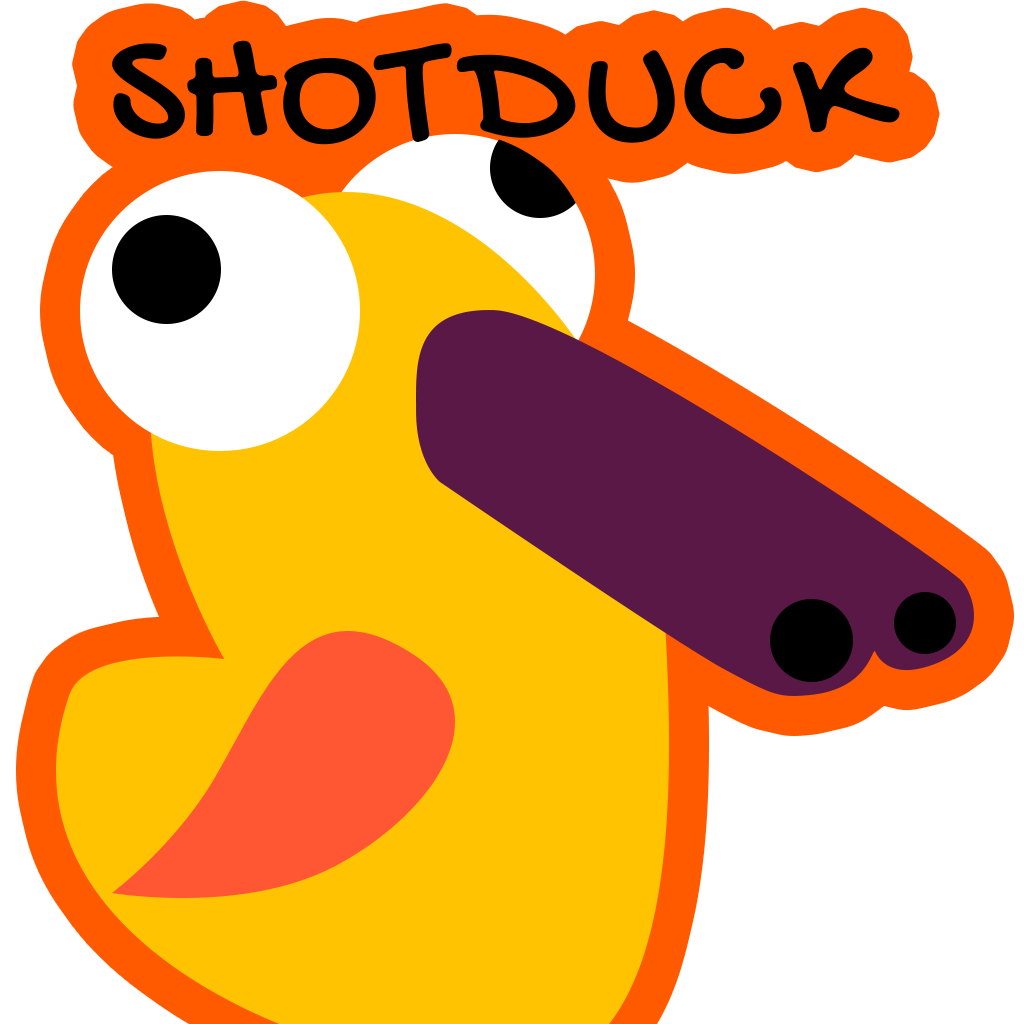
<style>
.page{position:relative;width:1024px;height:1024px;background:#ffffff}
.page>*{position:absolute;margin:0}
.t1{font:166.5px "GochiHandCyrillic";color:#000000}
</style>
<div class="page">
<p class="t1" style="left:112px;top:40px;width:788px;height:105px">SHOTDUCK</p>
</div>
